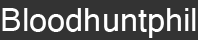
<style>
.page{position:relative;width:198px;height:40px;background:#333333}
.page>*{position:absolute;margin:0}
.t1{font:36px "Raavi";color:#ffffff}
</style>
<div class="page">
<p class="t1" style="left:2px;top:8px;width:194px;height:30px">Bloodhuntphil</p>
</div>
